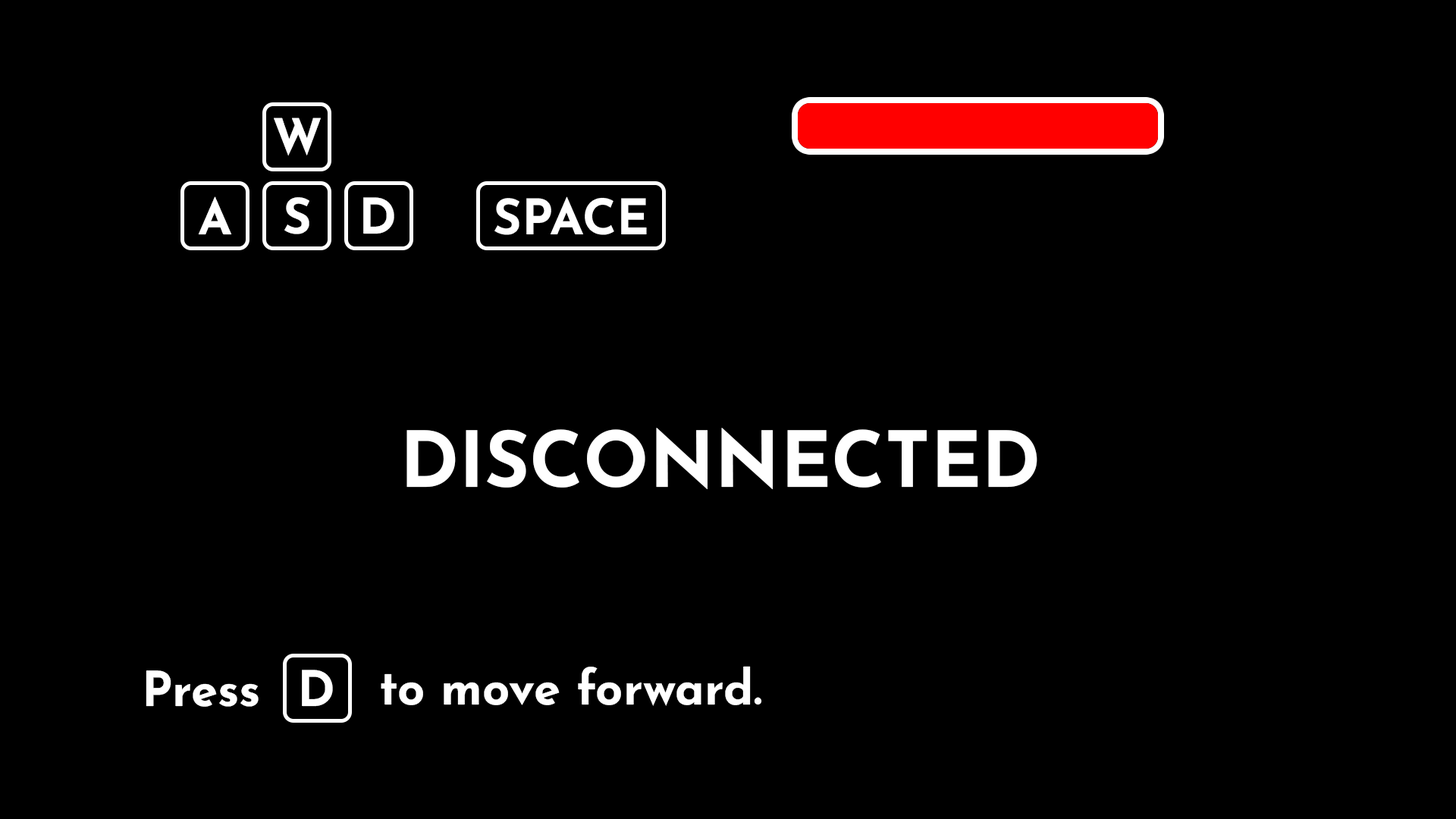
<style>
.page{position:relative;width:1456px;height:819px;background:#000000}
.page>*{position:absolute;margin:0}
.t1{font:48.9px "JosefinSans-Bold";color:#ffffff}
.t2{font:77px "JosefinSans-Bold";color:#ffffff}
.t3{font:48.1px "JosefinSans-Bold";color:#ffffff}
</style>
<div class="page">
<p class="t1" style="left:274px;top:118px;width:47px;height:38px">W</p>
<p class="t1" style="left:198px;top:196px;width:34px;height:39px">A</p>
<p class="t1" style="left:284px;top:197px;width:25px;height:37px">S</p>
<p class="t1" style="left:363px;top:197px;width:31px;height:37px">D</p>
<p class="t2" style="left:406px;top:428px;width:631px;height:62px">DISCONNECTED</p>
<p class="t3" style="left:381px;top:666px;width:381px;height:40px">to move forward.</p>
<p class="t3" style="left:146px;top:670px;width:113px;height:37px">Press</p>
<p class="t1" style="left:302px;top:670px;width:31px;height:37px">D</p>
</div>
